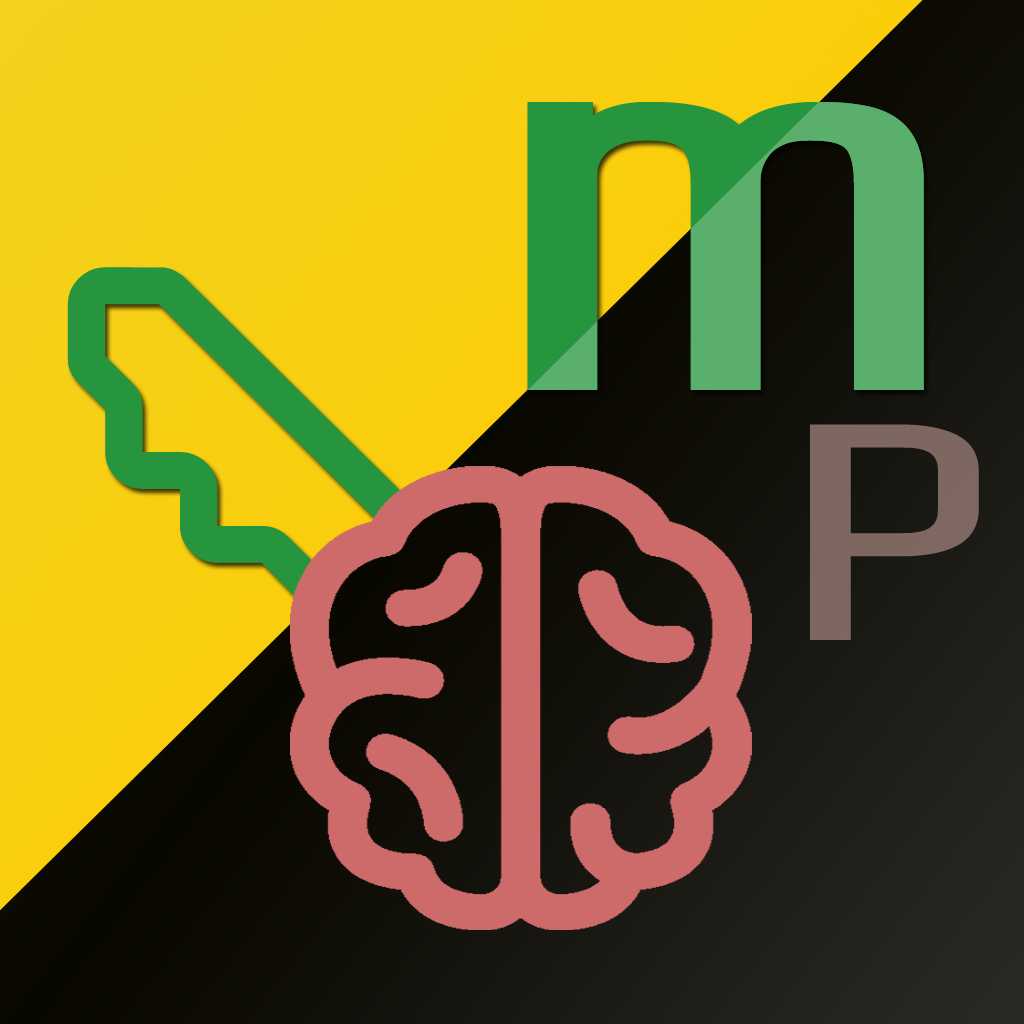
<style>
.page{position:relative;width:1024px;height:1024px}
.page>*{position:absolute;margin:0}
.t1{font:576px "Share-TechMono";letter-spacing:0.09em;scale:1.52 1}
.t2{font:308px "Share-TechMono";letter-spacing:0.09em;color:#8a706a;scale:1.52 1}
</style>
<div class="page">
<p class="t1" style="left:527px;top:102px;width:397px;height:288px">m</p>
<p class="t1" style="left:527px;top:102px;width:397px;height:288px">m</p>
<p class="t2" style="left:810px;top:424px;width:169px;height:216px;opacity:0.9">P</p>
</div>
